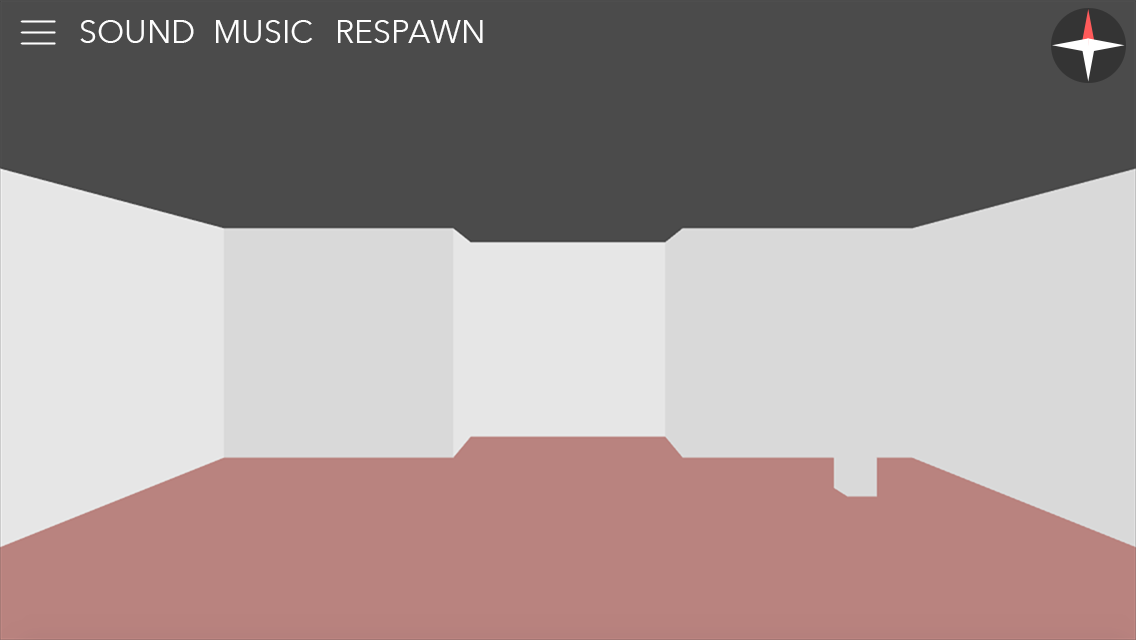
<style>
.page{position:relative;width:1136px;height:640px;background:#4b4b4b}
.page>*{position:absolute;margin:0}
.t1{font:32px "AvenirNext-Regular";color:#fdfdfd}
</style>
<div class="page">
<p class="t1" style="left:80px;top:20px;width:114px;height:23px">SOUND</p>
<p class="t1" style="left:216px;top:20px;width:97px;height:23px">MUSIC</p>
<p class="t1" style="left:338px;top:20px;width:145px;height:23px">RESPAWN</p>
</div>
